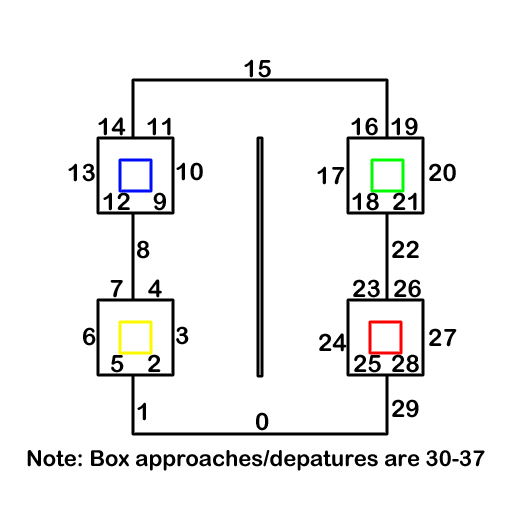
<style>
.page{position:relative;width:512px;height:512px;background:#ffffff}
.page>*{position:absolute;margin:0}
.t1{font:24px "ArialRoundedMTBold";color:#000000}
.t2{font:22px "ArialRoundedMTBold";color:#000000}
</style>
<div class="page">
<p class="t1" style="left:244px;top:59px;width:27px;height:19px">15</p>
<p class="t1" style="left:98px;top:117px;width:28px;height:19px">14</p>
<p class="t1" style="left:147px;top:117px;width:24px;height:19px">11</p>
<p class="t1" style="left:351px;top:117px;width:27px;height:19px">16</p>
<p class="t1" style="left:391px;top:117px;width:27px;height:19px">19</p>
<p class="t1" style="left:68px;top:163px;width:27px;height:19px">13</p>
<p class="t1" style="left:176px;top:162px;width:27px;height:19px">10</p>
<p class="t1" style="left:317px;top:166px;width:28px;height:19px">17</p>
<p class="t1" style="left:429px;top:163px;width:27px;height:19px">20</p>
<p class="t1" style="left:103px;top:192px;width:27px;height:19px">12</p>
<p class="t1" style="left:153px;top:192px;width:13px;height:19px">9</p>
<p class="t1" style="left:352px;top:192px;width:27px;height:19px">18</p>
<p class="t1" style="left:393px;top:192px;width:24px;height:19px">21</p>
<p class="t1" style="left:137px;top:240px;width:13px;height:19px">8</p>
<p class="t1" style="left:392px;top:240px;width:27px;height:18px">22</p>
<p class="t1" style="left:110px;top:280px;width:13px;height:18px">7</p>
<p class="t1" style="left:148px;top:279px;width:14px;height:19px">4</p>
<p class="t1" style="left:353px;top:279px;width:27px;height:19px">23</p>
<p class="t1" style="left:394px;top:279px;width:27px;height:19px">26</p>
<p class="t1" style="left:83px;top:327px;width:13px;height:19px">6</p>
<p class="t1" style="left:176px;top:326px;width:13px;height:19px">3</p>
<p class="t1" style="left:429px;top:328px;width:28px;height:19px">27</p>
<p class="t1" style="left:319px;top:333px;width:28px;height:19px">24</p>
<p class="t1" style="left:111px;top:355px;width:13px;height:18px">5</p>
<p class="t1" style="left:148px;top:354px;width:13px;height:18px">2</p>
<p class="t1" style="left:354px;top:354px;width:27px;height:19px">25</p>
<p class="t1" style="left:392px;top:354px;width:27px;height:19px">28</p>
<p class="t1" style="left:392px;top:399px;width:27px;height:19px">29</p>
<p class="t1" style="left:137px;top:402px;width:9px;height:19px">1</p>
<p class="t1" style="left:256px;top:412px;width:13px;height:19px">0</p>
<p class="t2" style="left:27px;top:450px;width:458px;height:21px">Note: Box approaches/depatures are 30-37</p>
</div>
